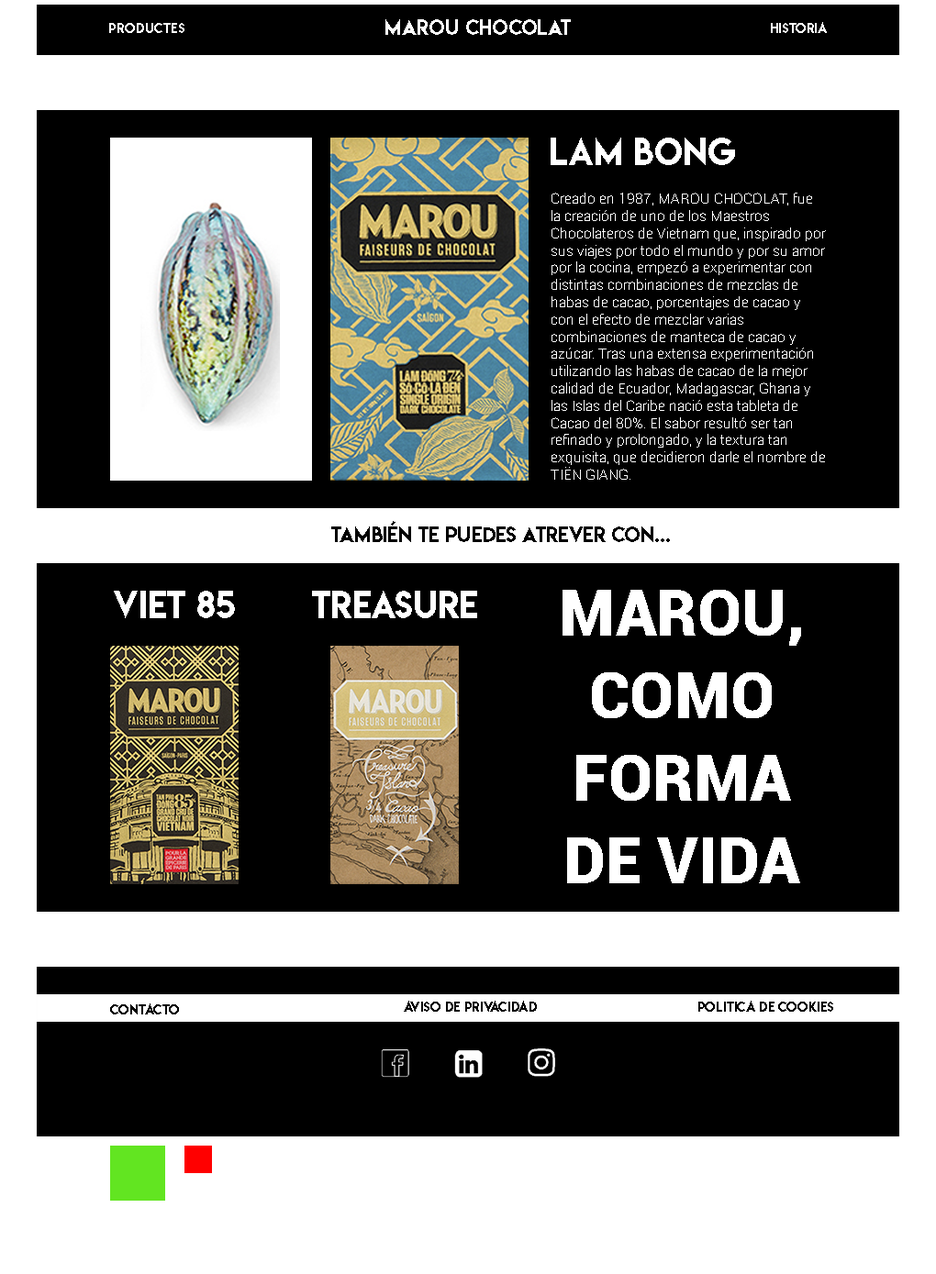
<style>
.page{position:relative;width:936px;height:1274px;background:#000000}
.page>*{position:absolute;margin:0}
.t1{font:12.8px "LemonMilk";color:#ffffff}
.t2{font:19.3px "LemonMilk";color:#ffffff}
.t3{font:33.9px "LemonMilk";color:#ffffff}
.t4{font:14.7px/17.2px "Roboto-Thin";color:#ffffff}
.t5{font:19.3px "LemonMilk";color:#000000}
.t6{font:34.2px "LemonMilk";color:#ffffff}
.t7{font:64.2px/82.6px "Roboto-Black";color:#ffffff}
.t8{font:12.8px "LemonMilk";color:#000000}
</style>
<div class="page">
<p class="t1" style="left:109px;top:23px;width:75px;height:10px">PRODUCTES</p>
<p class="t2" style="left:385px;top:19px;width:186px;height:16px">MAROU CHOCOLAT</p>
<p class="t1" style="left:771px;top:22px;width:56px;height:11px">HISTORIA</p>
<p class="t3" style="left:550px;top:138px;width:185px;height:27px">LAM BONG</p>
<p class="t4" style="left:550px;top:193px;width:276px;height:287px">Creado en 1987, MAROU CHOCOLAT, fue la creación de uno de los Maestros Chocolateros de Vietnam que, inspirado por sus viajes por todo el mundo y por su amor por la cocina, empezó a experimentar con distintas combinaciones de mezclas de habas de cacao, porcentajes de cacao y con el efecto de mezclar varias combinaciones de manteca de cacao y azúcar. Tras una extensa experimentación utilizando las habas de cacao de la mejor calidad de Ecuador, Madagascar, Ghana y las Islas del Caribe nació esta tableta de Cacao del 80%. El sabor resultó ser tan refinado y prolongado, y la textura tan exquisita, que decidieron darle el nombre de TIËN GIANG.</p>
<p class="t5" style="left:331px;top:521px;width:339px;height:21px">TAMBIÉN TE PUEDES ATREVER CON...</p>
<p class="t3" style="left:114px;top:591px;width:121px;height:27px">VIET 85</p>
<p class="t6" style="left:312px;top:591px;width:165px;height:27px">TREASURE</p>
<p class="t7" style="left:562px;top:590px;width:239px;height:293px;text-align:center">MAROU, COMO FORMA DE VIDA</p>
<p class="t8" style="left:404px;top:1001px;width:133px;height:11px">aviso de privacidad</p>
<p class="t8" style="left:698px;top:1001px;width:135px;height:11px">politica de cookies</p>
<p class="t8" style="left:110px;top:1004px;width:69px;height:11px">contacto</p>
</div>
